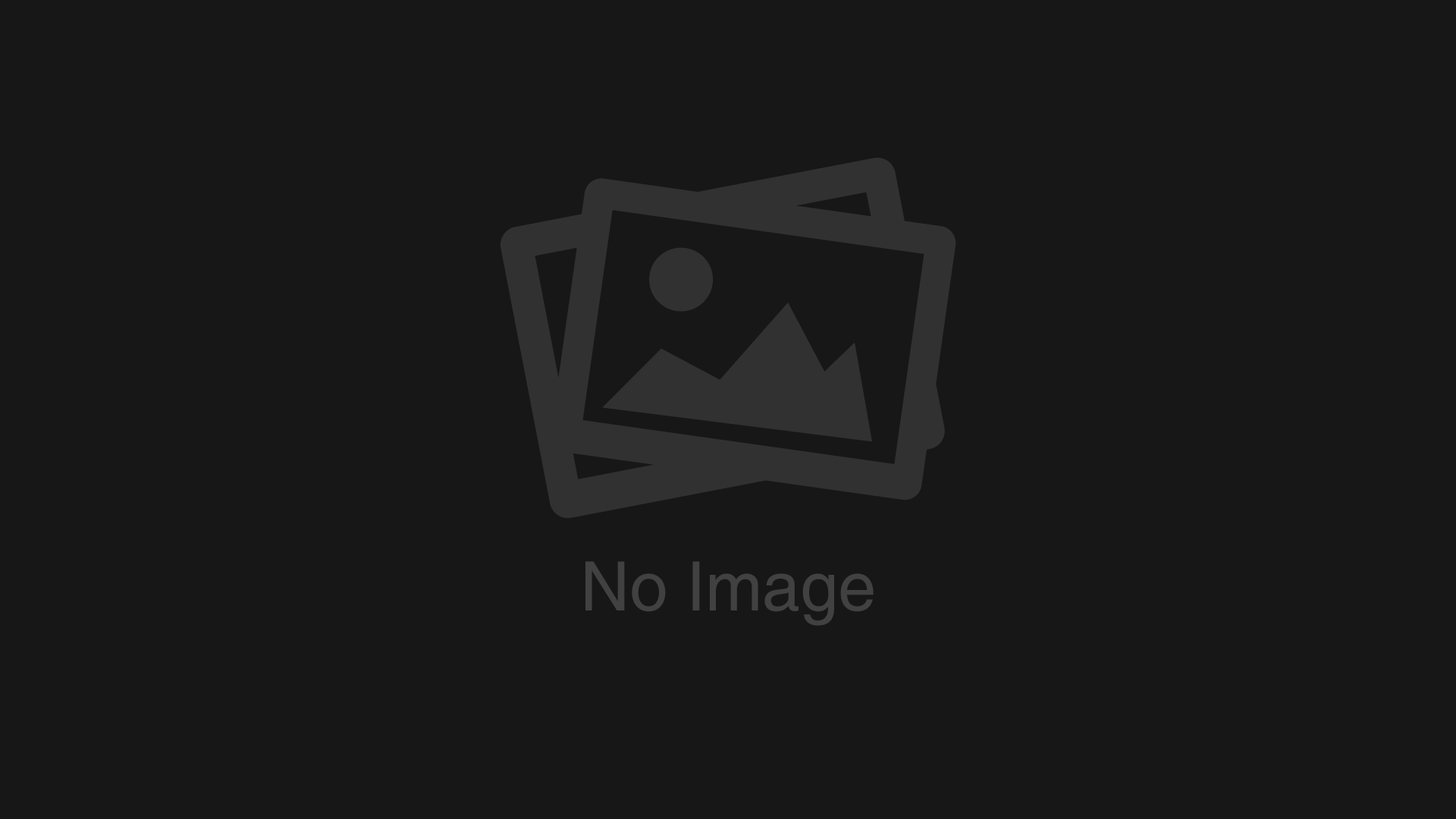
<style>
.page{position:relative;width:1456px;height:819px;background:#171717}
.page>*{position:absolute;margin:0}
.t1{font:68.2px "Helvetica";color:#414141}
</style>
<div class="page">
<p class="t1" style="left:585px;top:561px;width:289px;height:65px">No Image</p>
</div>
